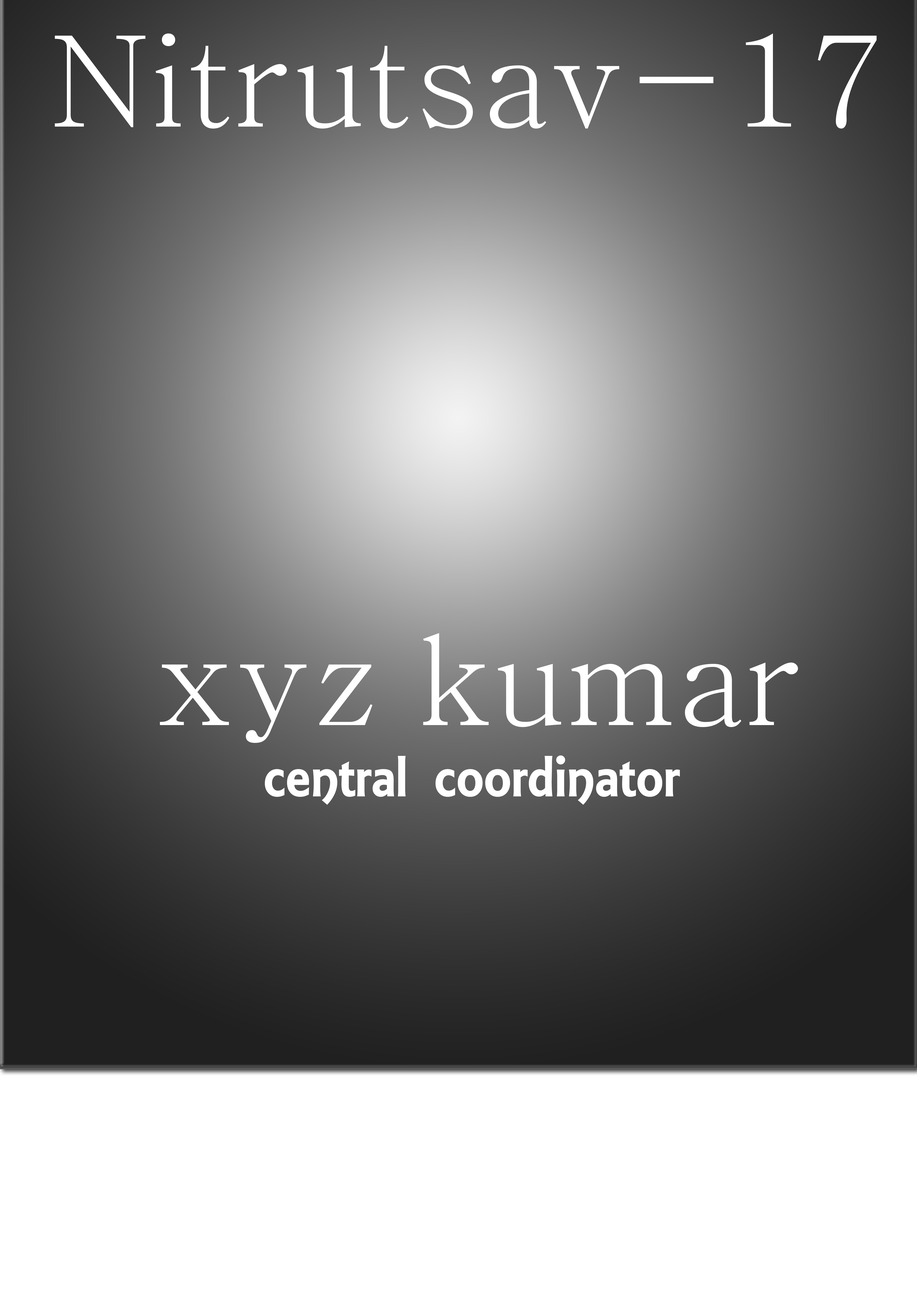
<style>
.page{position:relative;width:917px;height:1300px}
.page>*{position:absolute;margin:0}
.t1{font:126.5px "AdobeMyungjoStd-Medium";color:#ffffff}
.t2{font:62.4px "ARESSENCE";color:#ffffff}
</style>
<div class="page">
<p class="t1" style="left:55px;top:33px;width:822px;height:96px">Nitrutsav-17</p>
<p class="t1" style="left:160px;top:633px;width:638px;height:110px">xyz kumar</p>
<p class="t2" style="left:265px;top:755px;width:415px;height:50px">central coordinator</p>
</div>
